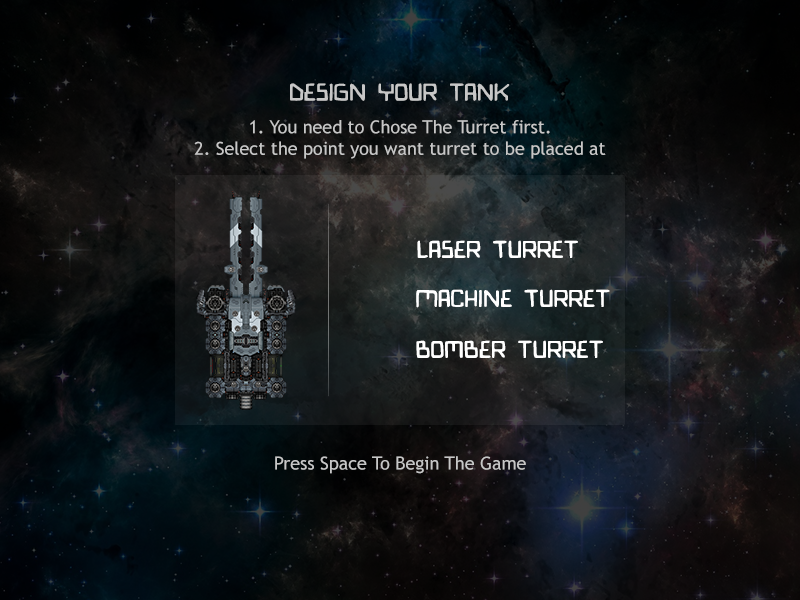
<style>
.page{position:relative;width:800px;height:600px}
.page>*{position:absolute;margin:0}
.t1{font:18px "TrebuchetMS";color:#c7c7c7}
.t2{font:24px "BionicComic";color:#c7c7c7}
.t3{font:24px "BionicComic";color:#ffffff}
</style>
<div class="page">
<p class="t1" style="left:194px;top:83px;width:412px;height:76px;text-align:center"><span class="t2">Design your tank<br><br></span>1. You need to Chose The Turret first.<br>2. Select the point you want turret to be placed at</p>
<p class="t3" style="left:417px;top:240px;width:161px;height:18px">Laser Turret</p>
<p class="t3" style="left:416px;top:289px;width:194px;height:19px">Machine Turret</p>
<p class="t3" style="left:416px;top:340px;width:187px;height:18px">Bomber turret</p>
<p class="t1" style="left:275px;top:456px;width:251px;height:18px">Press Space To Begin The Game</p>
</div>
